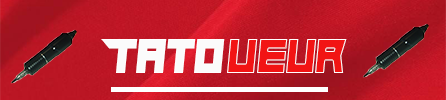
<style>
.page{position:relative;width:446px;height:100px}
.page>*{position:absolute;margin:0}
.t1{font:50px "Hindsight2020";color:#fbfbfb;scale:0.92 1}
.t2{font:50px "Hindsight2020";color:#f21414;scale:0.92 1}
</style>
<div class="page">
<p class="t1" style="left:101px;top:39px;width:124px;height:34px">Tato</p>
<p class="t2" style="left:227px;top:39px;width:120px;height:34px">ueur</p>
</div>
